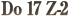
<style>
.page{position:relative;width:84px;height:16px;background:#ffffff}
.page>*{position:absolute;margin:0}
.t1{font:18px "RyuminPro-ExBold";letter-spacing:-0.06em;color:#4a3f32;font-weight:bold;scale:0.9 1}
</style>
<div class="page">
<p class="t1" style="left:1px;top:1px;width:68px;height:15px">Do 17 Z-2</p>
</div>
